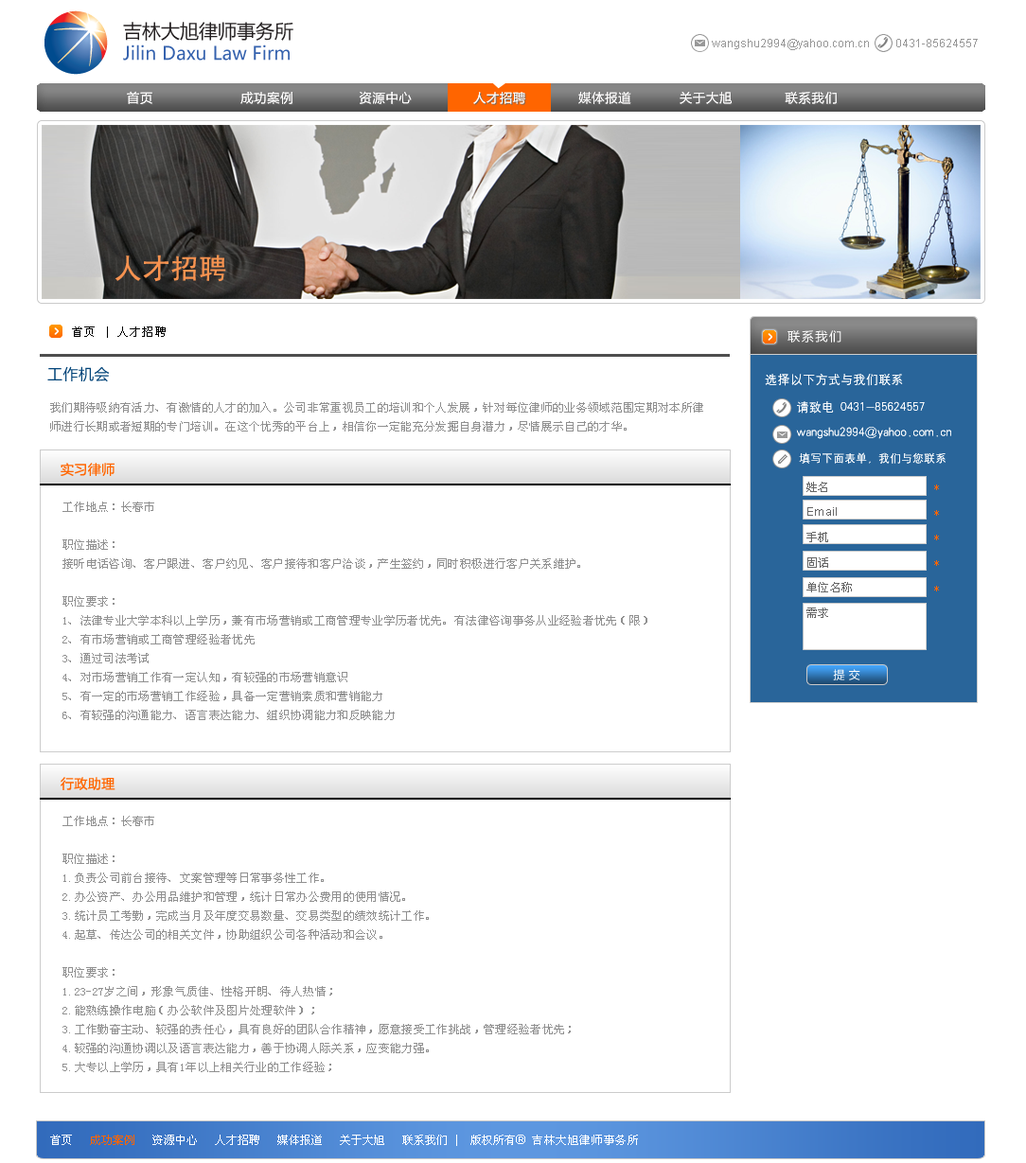
<style>
.page{position:relative;width:1026px;height:1163px;background:#ffffff}
.page>*{position:absolute;margin:0}
.t1{font:18.4px "MicrosoftYaHei";color:#3562ae}
.t2{font:18.9px "MicrosoftYaHei";color:#231f20}
.t3{font:11.4px "ArialMT";color:#989898}
.t4{font:12.6px "MicrosoftYaHei";letter-spacing:0.05em;color:#fffefe}
.t5{font:28.4px "SimHei";color:#f89350}
.t6{font:11.4px "SimSun";letter-spacing:0.1em;color:#000000}
.t7{font:12.6px "MicrosoftYaHei";letter-spacing:0.1em;color:#ffffff}
.t8{font:15.1px "MicrosoftYaHei";letter-spacing:0.029em;color:#004378}
.t9{font:12.6px/27.8px "HYg2gj";color:#ffffff}
.t10{font:12.6px/25.2px "HYg2gj";color:#ffffff}
.t11{font:11.4px/25.2px "HYg2gj";color:#ffffff}
.t12{font:11.4px/18.9px "SimSun";letter-spacing:0.029em;color:#909090}
.t13{font:13.2px "MicrosoftYaHei";letter-spacing:0.029em;color:#ff6600}
.t14{font:11.4px/25.2px "SimSun";letter-spacing:0.029em;color:#666666}
.t15{font:11.4px/25.2px "ArialMT";letter-spacing:0.029em;color:#666666}
.t16{font:11.4px/25.2px "SimSun";letter-spacing:0.029em;color:#ff6500}
.t17{font:11.4px "MicrosoftYaHei";letter-spacing:0.029em;color:#ffffff}
.t18{font:11.4px "SimSun";color:#ffffff}
.t19{font:11.4px "SimSun";color:#ff6500}
.t20{font:12.6px "ArialMT";color:#ffffff}
.t21{font:11.4px "SimSun";letter-spacing:0.05em;color:#ffffff}
</style>
<div class="page">
<p class="t1" style="left:123px;top:22px;width:170px;height:39px"><span class="t2">吉林大旭律师事务所<br></span>Jilin Daxu Law Firm</p>
<p class="t3" style="left:711px;top:39px;width:266px;height:11px">wangshu2994@yahoo.com.cn         0431-85624557</p>
<p class="t4" style="left:127px;top:91px;width:709px;height:13px">首页                    成功案例               资源中心              人才招聘            媒体报道           关于大旭            联系我们</p>
<p class="t4" style="left:127px;top:91px;width:709px;height:13px">首页                    成功案例               资源中心              人才招聘            媒体报道           关于大旭            联系我们</p>
<p class="t5" style="left:114px;top:254px;width:112px;height:28px">人才招聘</p>
<p class="t6" style="left:72px;top:326px;width:94px;height:12px">首页 | 人才招聘</p>
<p class="t7" style="left:787px;top:330px;width:54px;height:12px">联系我们</p>
<p class="t7" style="left:787px;top:330px;width:54px;height:12px">联系我们</p>
<p class="t8" style="left:47px;top:366px;width:63px;height:16px">工作机会</p>
<p class="t9" style="left:764px;top:374px;width:187px;height:90px">选择以下方式与我们联系<br>     请致电 0431-85624557<br><span class="t10">     wangshu2994@yahoo.com.cn<br></span><span class="t11">      填写下面表单，我们与您联系</span></p>
<p class="t9" style="left:764px;top:374px;width:187px;height:90px">选择以下方式与我们联系<br>     请致电 0431-85624557<br><span class="t10">     wangshu2994@yahoo.com.cn<br></span><span class="t11">      填写下面表单，我们与您联系</span></p>
<p class="t12" style="left:50px;top:402px;width:653px;height:29px">我们期待吸纳有活力、有激情的人才的加入。公司非常重视员工的培训和个人发展，针对每位律师的业务领域范围定期对本所律师进行长期或者短期的专门培训。在这个优秀的平台上，相信你一定能充分发掘自身潜力，尽情展示自己的才华。<br><br>请将您的简历发送至：wangshu2994@yahoo.com.cn</p>
<p class="t13" style="left:61px;top:463px;width:53px;height:13px">实习律师</p>
<p class="t14" style="left:806px;top:482px;width:45px;height:136px">姓名<br><span class="t15">Email<br></span>手机<br>固话<br>单位名称<br>需求</p>
<p class="t16" style="left:934px;top:484px;width:5px;height:107px">*<br>*<br>*<br>*<br>*</p>
<p class="t12" style="left:62px;top:501px;width:585px;height:219px">工作地点：长春市<br><br>职位描述：<br>接听电话咨询、客户跟进、客户约见、客户接待和客户洽谈，产生签约，同时积极进行客户关系维护。           <br><br>职位要求：<br>1、法律专业大学本科以上学历，兼有市场营销或工商管理专业学历者优先。有法律咨询事务从业经验者优先（限）<br>2、有市场营销或工商管理经验者优先<br>3、通过司法考试<br>4、对市场营销工作有一定认知，有较强的市场营销意识<br>5、有一定的市场营销工作经验，具备一定营销素质和营销能力<br>6、有较强的沟通能力、语言表达能力、组织协调能力和反映能力</p>
<p class="t17" style="left:833px;top:669px;width:27px;height:11px">提 交</p>
<p class="t13" style="left:61px;top:777px;width:54px;height:13px">行政助理</p>
<p class="t12" style="left:62px;top:816px;width:508px;height:256px">工作地点：长春市<br><br>职位描述：<br>1.负责公司前台接待、文案管理等日常事务性工作。 <br>2.办公资产、办公用品维护和管理，统计日常办公费用的使用情况。<br>3.统计员工考勤，完成当月及年度交易数量、交易类型的绩效统计工作。<br>4.起草、传达公司的相关文件，协助组织公司各种活动和会议。 <br><br>职位要求：<br>1.23-27岁之间，形象气质佳、性格开朗、待人热情；<br>2.能熟练操作电脑（办公软件及图片处理软件）；<br>3.工作勤奋主动、较强的责任心，具有良好的团队合作精神，愿意接受工作挑战，管理经验者优先；<br>4.较强的沟通协调以及语言表达能力，善于协调人际关系，应变能力强。<br>5.大专以上学历，具有1年以上相关行业的工作经验；</p>
<p class="t18" style="left:50px;top:1134px;width:588px;height:12px">首页   <span class="t19">成功案例 </span>  资源中心   人才招聘   媒体报道   关于大旭   联系我们 |  版权所有<span class="t20">® </span><span class="t21">吉林大旭律师事务所</span></p>
</div>
